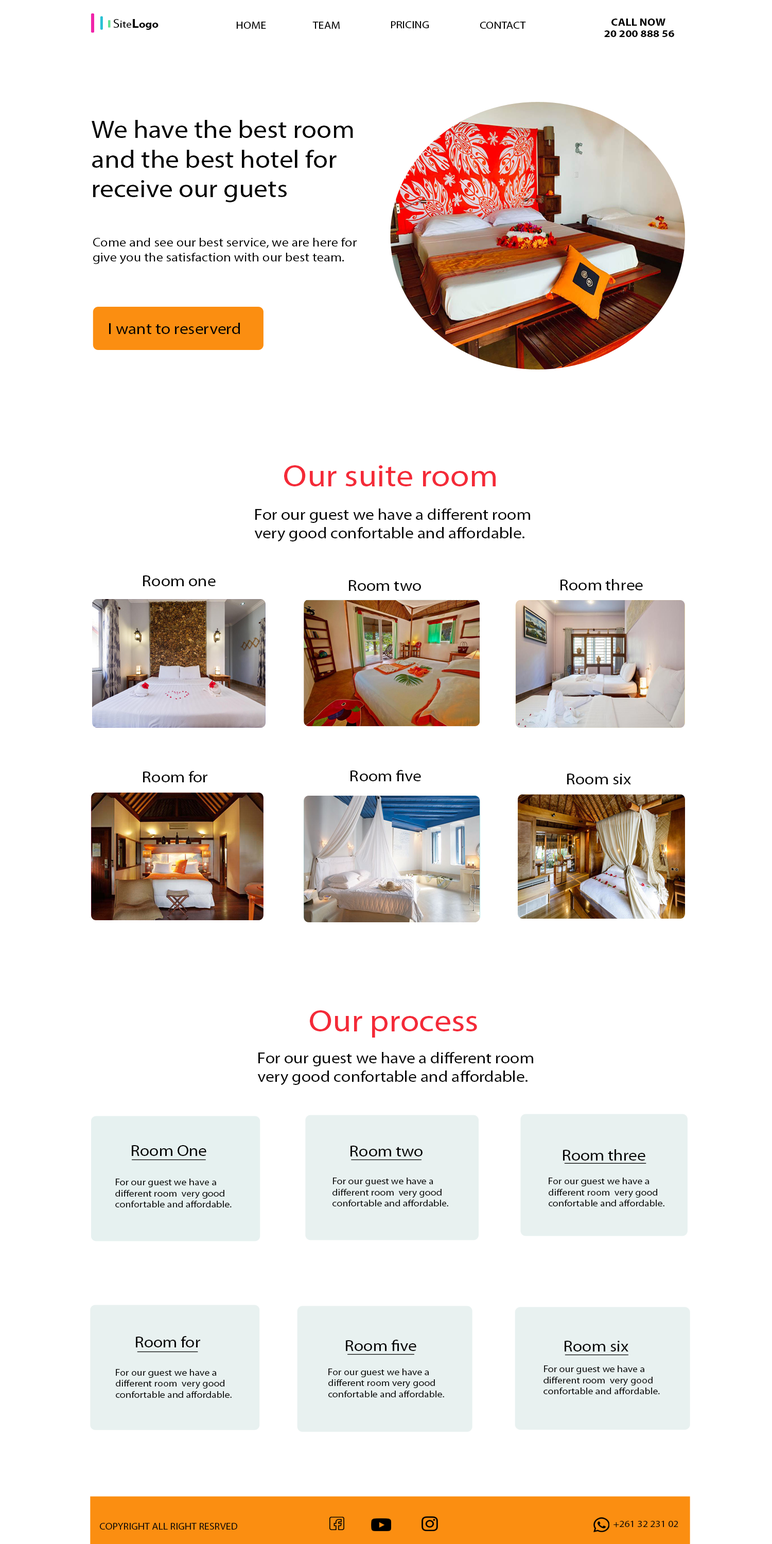
<style>
.page{position:relative;width:772px;height:1544px;background:#ffffff}
.page>*{position:absolute;margin:0}
.t1{font:10.3px "MyriadPro-Regular";color:#020202;scale:1.11 1}
.t2{font:12.4px "MyriadPro-Regular";color:#020202;scale:1.11 1}
.t3{font:12.4px "MyriadPro-Bold";color:#020202;scale:1.11 1}
.t4{font:10.3px "MyriadPro-Bold";color:#020202;scale:1.11 1}
.t5{font:24.7px "MyriadPro-Regular";color:#020202;scale:1.11 1}
.t6{font:15.4px "MyriadPro-Regular";color:#020202;scale:1.11 1}
.t7{font:30.9px "MyriadPro-Regular";color:#f42a38;scale:1.11 1}
.t8{font:15.4px "MyriadPro-Regular";color:#070707;scale:1.11 1}
.t9{font:15.4px "MyriadPro-Regular";color:#040404;scale:1.11 1}
.t10{font:9.3px "MyriadPro-Regular";color:#070707;scale:1.11 1}
</style>
<div class="page">
<p class="t1" style="left:113px;top:19px;width:46px;height:11px"><span class="t2">S</span>ite<span class="t3">L</span><span class="t4">ogo</span></p>
<p class="t1" style="left:236px;top:22px;width:30px;height:7px">HOME</p>
<p class="t1" style="left:312px;top:22px;width:28px;height:7px">TEAM</p>
<p class="t1" style="left:391px;top:21px;width:38px;height:7px">PRICING</p>
<p class="t1" style="left:480px;top:22px;width:46px;height:7px">CONTACT</p>
<p class="t4" style="left:612px;top:19px;width:54px;height:7px">CALL NOW</p>
<p class="t4" style="left:604px;top:30px;width:70px;height:7px">20 200 888 56</p>
<p class="t5" style="left:92px;top:120px;width:261px;height:82px">We have the best room <br>and the best hotel for <br>receive our guets</p>
<p class="t2" style="left:93px;top:238px;width:264px;height:26px">Come and see our best service, we are here for <br>give you the satisfaction with our best team.</p>
<p class="t6" style="left:109px;top:323px;width:131px;height:11px">I want to reserverd</p>
<p class="t7" style="left:284px;top:465px;width:212px;height:21px">Our suite room</p>
<p class="t8" style="left:254px;top:509px;width:276px;height:33px">For our guest we have a different room <br>very good confortable and affordable.</p>
<p class="t8" style="left:143px;top:576px;width:73px;height:10px">Room one</p>
<p class="t8" style="left:349px;top:580px;width:72px;height:11px">Room two</p>
<p class="t8" style="left:561px;top:579px;width:82px;height:11px">Room three</p>
<p class="t8" style="left:143px;top:771px;width:64px;height:11px">Room for</p>
<p class="t8" style="left:351px;top:770px;width:70px;height:11px">Room five</p>
<p class="t8" style="left:567px;top:774px;width:64px;height:11px">Room six</p>
<p class="t7" style="left:310px;top:1010px;width:167px;height:28px">Our process</p>
<p class="t8" style="left:257px;top:1052px;width:276px;height:34px">For our guest we have a different room <br>very good confortable and affordable.</p>
<p class="t9" style="left:132px;top:1145px;width:74px;height:11px">Room One</p>
<p class="t8" style="left:351px;top:1146px;width:72px;height:11px">Room two</p>
<p class="t8" style="left:563px;top:1149px;width:83px;height:12px">Room three</p>
<p class="t10" style="left:115px;top:1179px;width:117px;height:29px">For our guest we have a <br>different room  very good <br>confortable and affordable.</p>
<p class="t10" style="left:333px;top:1178px;width:115px;height:29px">For our guest we have a <br>different room  very good <br>confortable and affordable.</p>
<p class="t10" style="left:549px;top:1178px;width:116px;height:29px">For our guest we have a <br>different room  very good<br>confortable and affordable.</p>
<p class="t8" style="left:136px;top:1336px;width:64px;height:12px">Room for</p>
<p class="t8" style="left:346px;top:1340px;width:70px;height:11px">Room five</p>
<p class="t8" style="left:565px;top:1341px;width:64px;height:11px">Room six</p>
<p class="t10" style="left:116px;top:1369px;width:116px;height:29px">For our guest we have a <br>different room  very good <br>confortable and affordable.</p>
<p class="t10" style="left:328px;top:1369px;width:116px;height:29px">For our guest we have a <br>different room very good <br>confortable and affordable.</p>
<p class="t10" style="left:544px;top:1366px;width:116px;height:29px">For our guest we have a <br>different room  very good <br>confortable and affordable.</p>
<p class="t10" style="left:100px;top:1523px;width:137px;height:7px">COPYRIGHT ALL RIGHT RESRVED</p>
<p class="t10" style="left:614px;top:1521px;width:64px;height:7px">+261 32 231 02</p>
</div>
